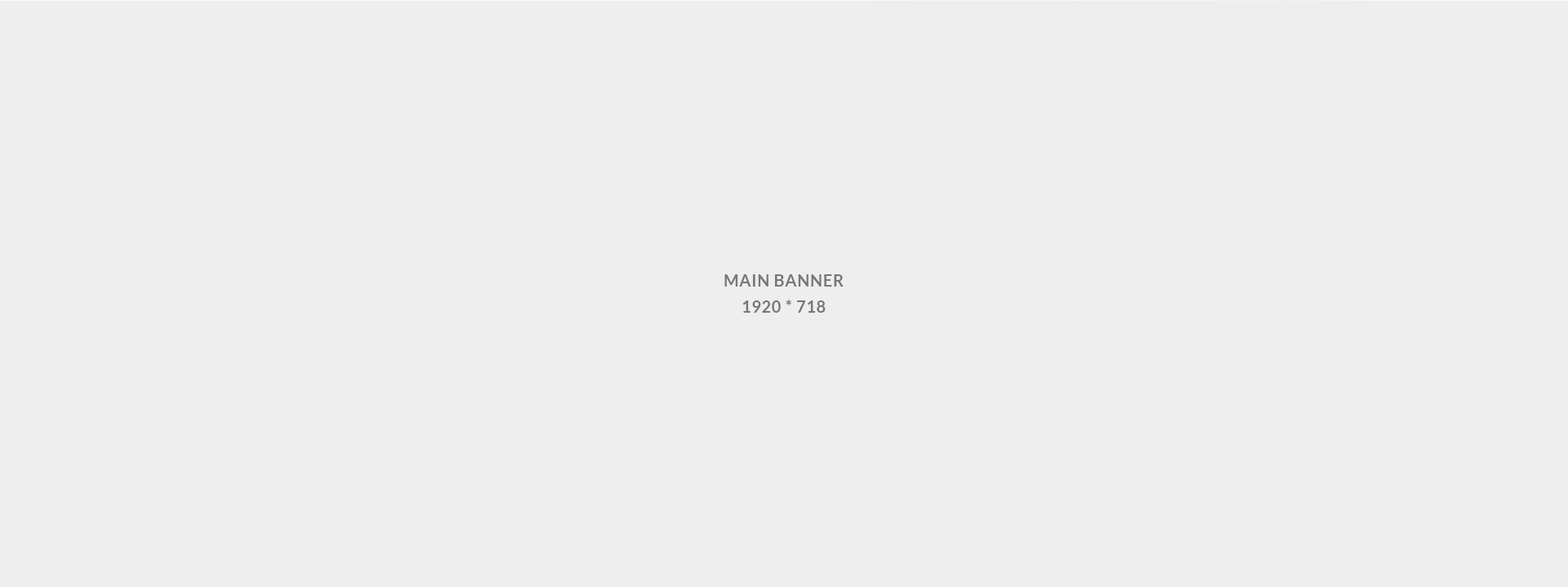
<style>
.page{position:relative;width:1568px;height:587px;background:#eeeeee}
.page>*{position:absolute;margin:0}
.t1{font:16.3px/26.1px "Lato-Bold";letter-spacing:0.035em;color:#777777;text-transform:uppercase}
</style>
<div class="page">
<p class="t1" style="left:724px;top:274px;width:120px;height:39px;text-align:center">main banner<br>1920 * 718</p>
</div>
